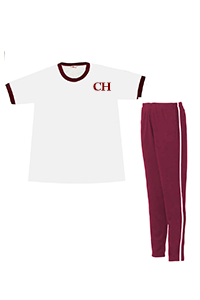
<style>
.page{position:relative;width:200px;height:300px;background:#ffffff}
.page>*{position:absolute;margin:0}
.t1{font:11.1px "PerpetuaTitlingMT-Bold";color:#7d0000}
</style>
<div class="page">
<p class="t1" style="left:93px;top:82px;width:18px;height:9px">ch</p>
</div>
